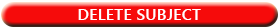
<style>
.page{position:relative;width:280px;height:28px;background:#f60b0b}
.page>*{position:absolute;margin:0}
.t1{font:16.4px "YuGothicUI-Bold";color:#ffffff}
</style>
<div class="page">
<p class="t1" style="left:78px;top:9px;width:123px;height:11px">DELETE SUBJECT</p>
</div>
